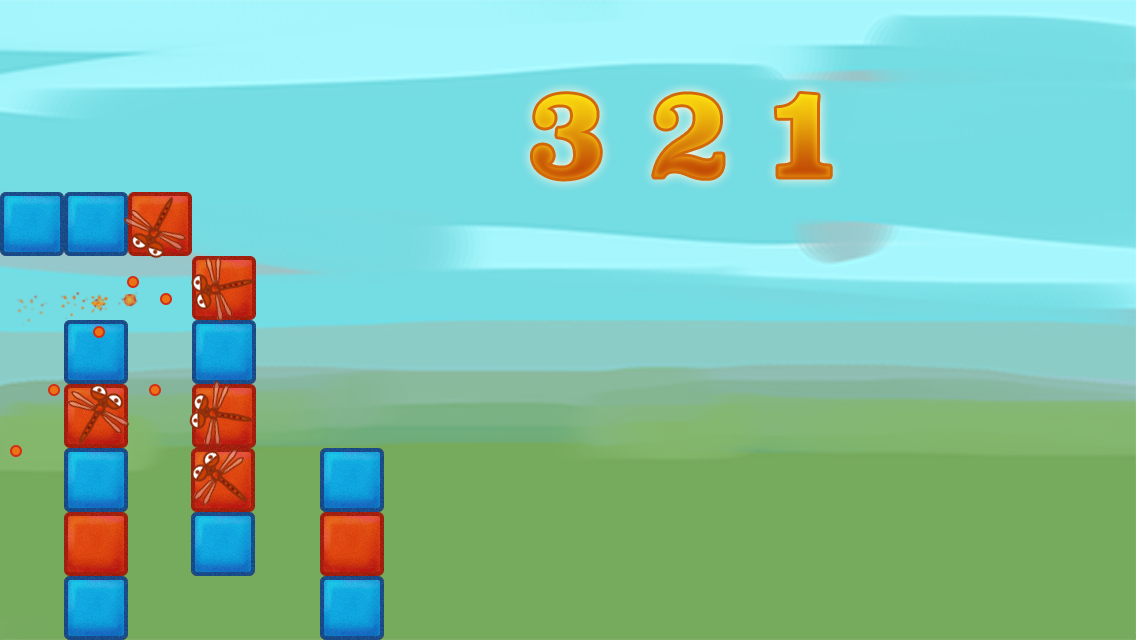
<style>
.page{position:relative;width:1136px;height:640px;background:#76aa5d}
.page>*{position:absolute;margin:0}
.t1{font:120px "Superclarendon-Bold"}
</style>
<div class="page">
<p class="t1" style="left:532px;top:94px;width:298px;height:85px">3 2 1</p>
</div>
